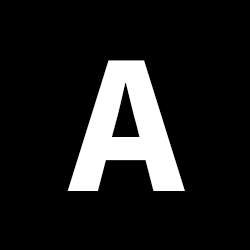
<style>
.page{position:relative;width:250px;height:250px;background:#000000}
.page>*{position:absolute;margin:0}
.t1{font:200px "SourceSansPro-Bold";color:#ffffff}
</style>
<div class="page">
<p class="t1" style="left:67px;top:60px;width:118px;height:131px">A</p>
</div>
